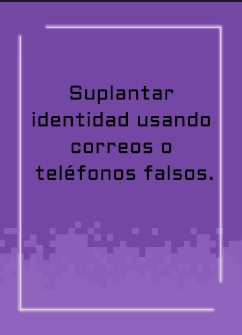
<style>
.page{position:relative;width:242px;height:335px;background:#7547a5}
.page>*{position:absolute;margin:0}
.t1{font:20px/26.7px "Aldrich-Regular";letter-spacing:0.025em;color:#000000}
</style>
<div class="page">
<p class="t1" style="left:32px;top:85px;width:181px;height:95px;text-align:center">Suplantar <br>identidad usando <br>correos o <br>teléfonos falsos.</p>
</div>
